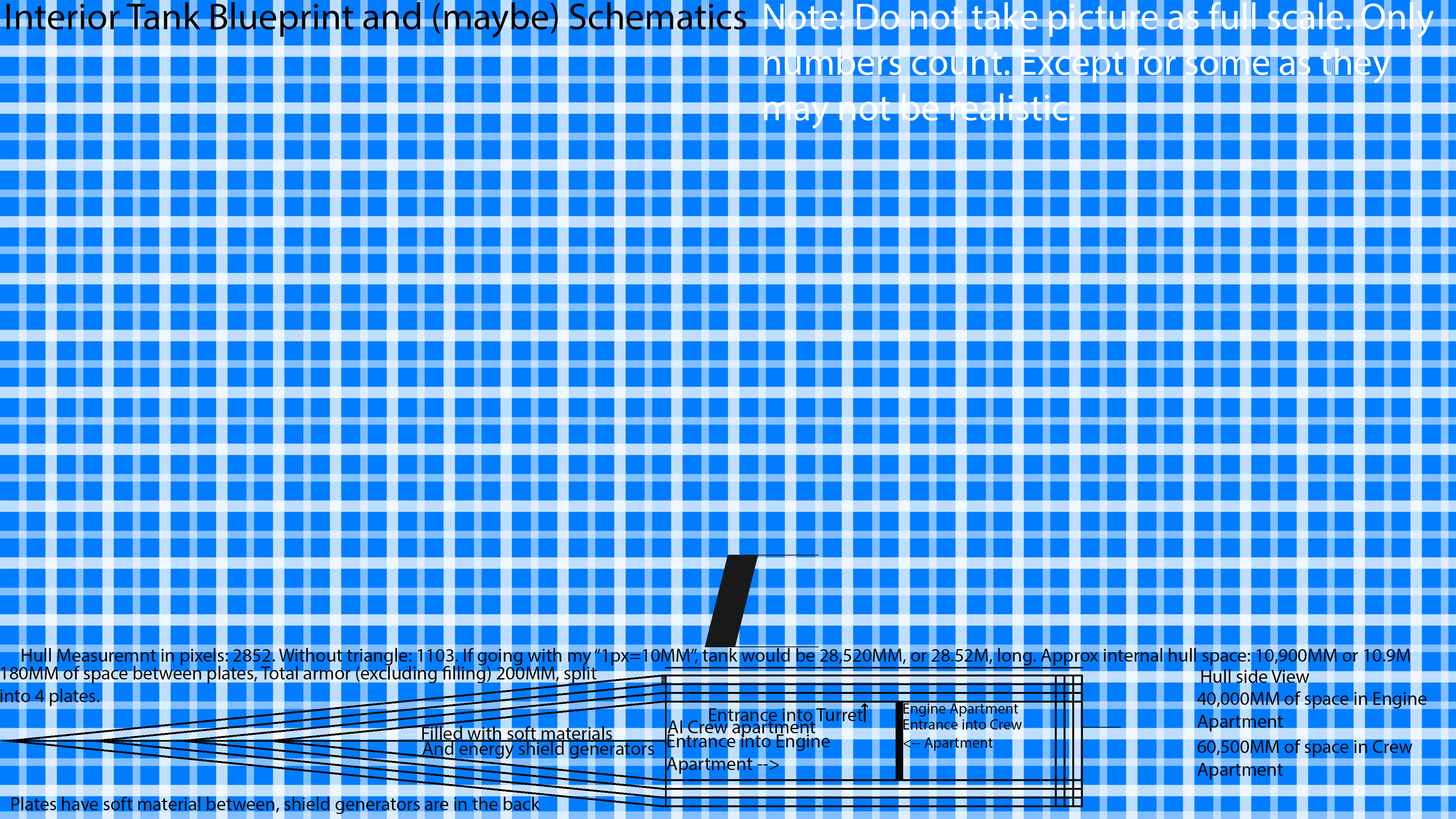
<style>
.page{position:relative;width:1456px;height:819px}
.page>*{position:absolute;margin:0}
.t1{font:37.9px "MyriadPro-Regular";color:#050505}
.t2{font:37.9px "MyriadPro-Regular";color:#ffffff}
.t3{font:19px "MyriadPro-Regular";color:#050505}
.t4{font:15.2px "MyriadPro-Regular";color:#050505}
</style>
<div class="page">
<p class="t1" style="left:6px;top:2px;width:740px;height:36px">Interior Tank Blueprint and (maybe) Schematics</p>
<p class="t2" style="left:764px;top:2px;width:670px;height:127px">Note: Do not take picture as full scale. Only<br>numbers count. Except for some as they<br>may not be realistic.</p>
<p class="t3" style="left:22px;top:648px;width:1388px;height:18px">Hull Measuremnt in pixels: 2852. Without triangle: 1103. If going with my “1px=10MM”, tank would be 28,520MM, or 28.52M, long. Approx internal hull space: 10,900MM or 10.9M</p>
<p class="t3" style="left:0px;top:666px;width:597px;height:40px">180MM of space between plates, Total armor (excluding filling) 200MM, split<br>into 4 plates.</p>
<p class="t3" style="left:1201px;top:669px;width:108px;height:14px">Hull side View</p>
<p class="t3" style="left:1197px;top:691px;width:230px;height:40px">40,000MM of space in Engine<br>Apartment</p>
<p class="t3" style="left:709px;top:708px;width:154px;height:13px">Entrance into Turret</p>
<p class="t4" style="left:904px;top:703px;width:114px;height:14px">Engine Apartment</p>
<p class="t3" style="left:668px;top:720px;width:148px;height:17px">AI Crew apartment</p>
<p class="t4" style="left:904px;top:719px;width:118px;height:32px">Entrance into Crew <br>&lt;-- Apartment</p>
<p class="t3" style="left:422px;top:726px;width:190px;height:14px">Filled with soft materials</p>
<p class="t3" style="left:667px;top:734px;width:163px;height:40px">Entrance into Engine<br>Apartment --&gt;</p>
<p class="t3" style="left:422px;top:741px;width:232px;height:18px">And energy shield generators</p>
<p class="t3" style="left:1197px;top:739px;width:215px;height:41px">60,500MM of space in Crew<br>Apartment</p>
<p class="t3" style="left:11px;top:797px;width:529px;height:17px">Plates have soft material between, shield generators are in the back</p>
</div>
